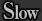
<style>
.page{position:relative;width:42px;height:21px;background:#333333}
.page>*{position:absolute;margin:0}
.t1{font:18px "RyuminPro-ExBold";letter-spacing:-0.04em;color:#c2c2c2;scale:0.9 1}
.t2{font:22px "RyuminPro-ExBold";letter-spacing:-0.04em;color:#c2c2c2;scale:0.9 1}
</style>
<div class="page">
<p class="t1" style="left:3px;top:2px;width:36px;height:17px"><span class="t2">S</span>low</p>
</div>
